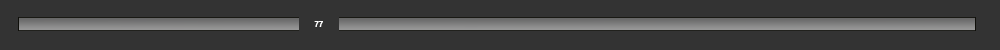
<style>
.page{position:relative;width:1000px;height:50px;background:#333333}
.page>*{position:absolute;margin:0}
.t1{font:8px "Arial-BoldMT";letter-spacing:-0.02em;color:#ffffff}
</style>
<div class="page">
<p class="t1" style="left:314px;top:21px;width:9px;height:6px">77</p>
</div>
